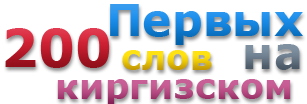
<style>
.page{position:relative;width:307px;height:104px;background:#ffffff}
.page>*{position:absolute;margin:0}
.t1{font:44px "Verdana-Bold"}
.t2{font:51.5px "Verdana-Bold"}
.t3{font:34.4px "Verdana-Bold"}
.t4{font:43.4px "Verdana-Bold";color:#6f7f8f}
.t5{font:35.4px "Verdana-Bold";color:#bd5289}
</style>
<div class="page">
<p class="t1" style="left:110px;top:4px;width:193px;height:41px">Первых</p>
<p class="t2" style="left:5px;top:28px;width:105px;height:40px">200</p>
<p class="t3" style="left:122px;top:50px;width:90px;height:20px">слов</p>
<p class="t4" style="left:245px;top:44px;width:55px;height:26px">на</p>
<p class="t5" style="left:57px;top:79px;width:234px;height:27px">киргизском</p>
</div>
